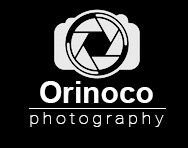
<style>
.page{position:relative;width:188px;height:148px;background:#000000}
.page>*{position:absolute;margin:0}
.t1{font:16.2px "Roboto-Thin";letter-spacing:0.2em;color:#ffffff;scale:1.11 1}
.t2{font:30px "Arial-BoldMT";color:#ffffff}
</style>
<div class="page">
<p class="t1" style="left:30px;top:81px;width:134px;height:46px;text-align:center"><span class="t2">Orinoco<br></span>photography</p>
</div>
